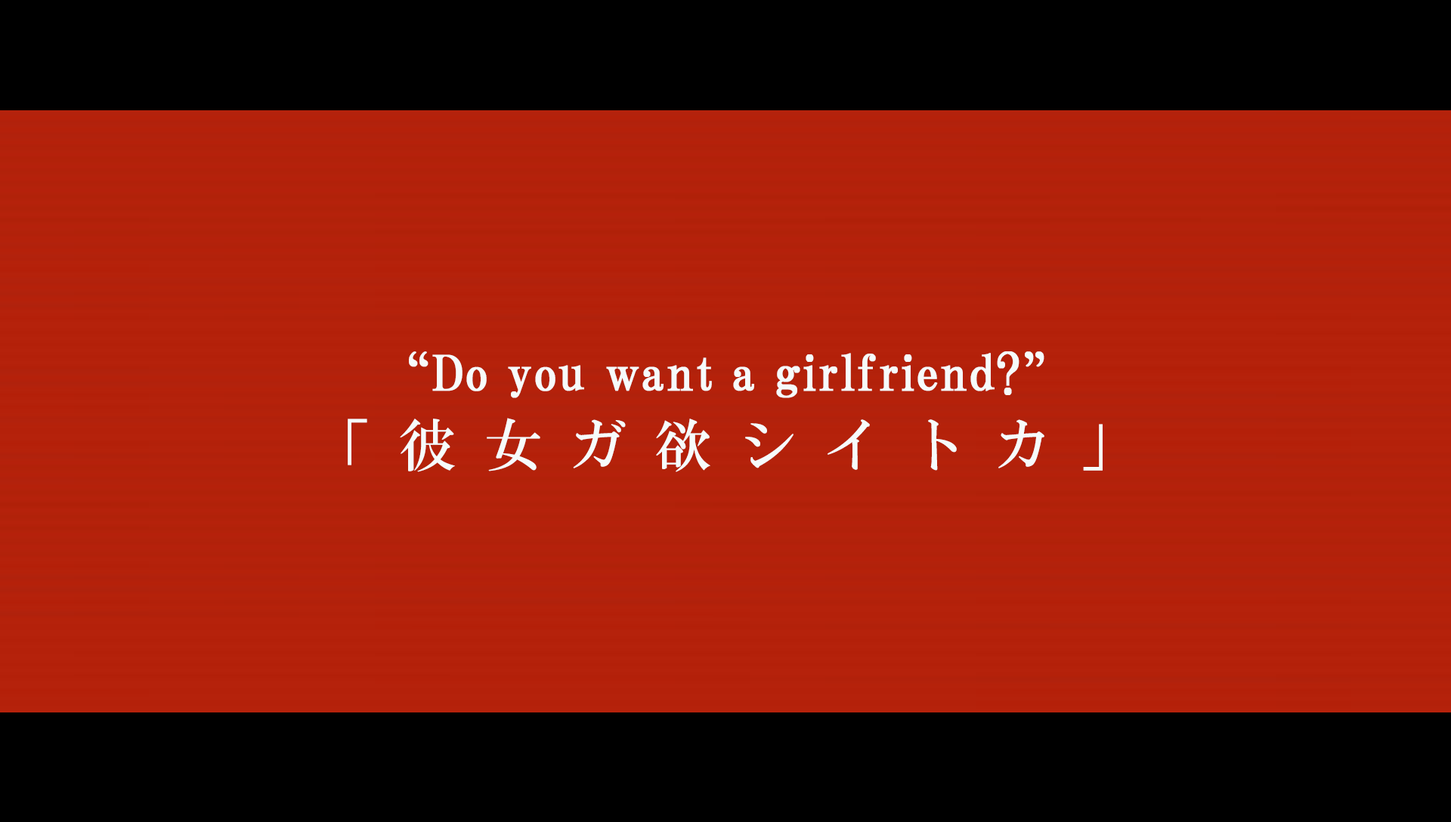
<style>
.page{position:relative;width:1451px;height:822px;background:#000000}
.page>*{position:absolute;margin:0}
.t1{font:48.4px "HGPMinchoB";letter-spacing:0.01em;color:#f6fbfb;font-weight:bold}
.t2{font:57.4px "HGMinchoB";letter-spacing:0.48em;color:#f6fbfb}
</style>
<div class="page">
<p class="t1" style="left:409px;top:351px;width:635px;height:47px">“Do you want a girlfriend?”</p>
<p class="t2" style="left:348px;top:418px;width:754px;height:54px">「彼女ガ欲シイトカ」</p>
</div>
